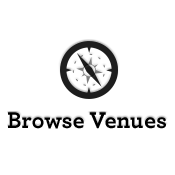
<style>
.page{position:relative;width:175px;height:175px;background:#ffffff}
.page>*{position:absolute;margin:0}
.t1{font:24px "Archer-Bold";color:#000000}
</style>
<div class="page">
<p class="t1" style="left:8px;top:112px;width:158px;height:17px">Browse Venues</p>
</div>
